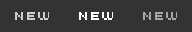
<style>
.page{position:relative;width:192px;height:32px;background:#333333}
.page>*{position:absolute;margin:0}
.t1{font:12.7px "Uni0554";color:#cdcdcd}
.t2{font:12.7px "Uni0554";color:#ffffff}
.t3{font:12.7px "Uni0554";color:#a5a5a5}
</style>
<div class="page">
<p class="t1" style="left:15px;top:12px;width:34px;height:8px">NEW</p>
<p class="t2" style="left:79px;top:12px;width:34px;height:8px">NEW</p>
<p class="t3" style="left:143px;top:12px;width:34px;height:8px">NEW</p>
</div>
